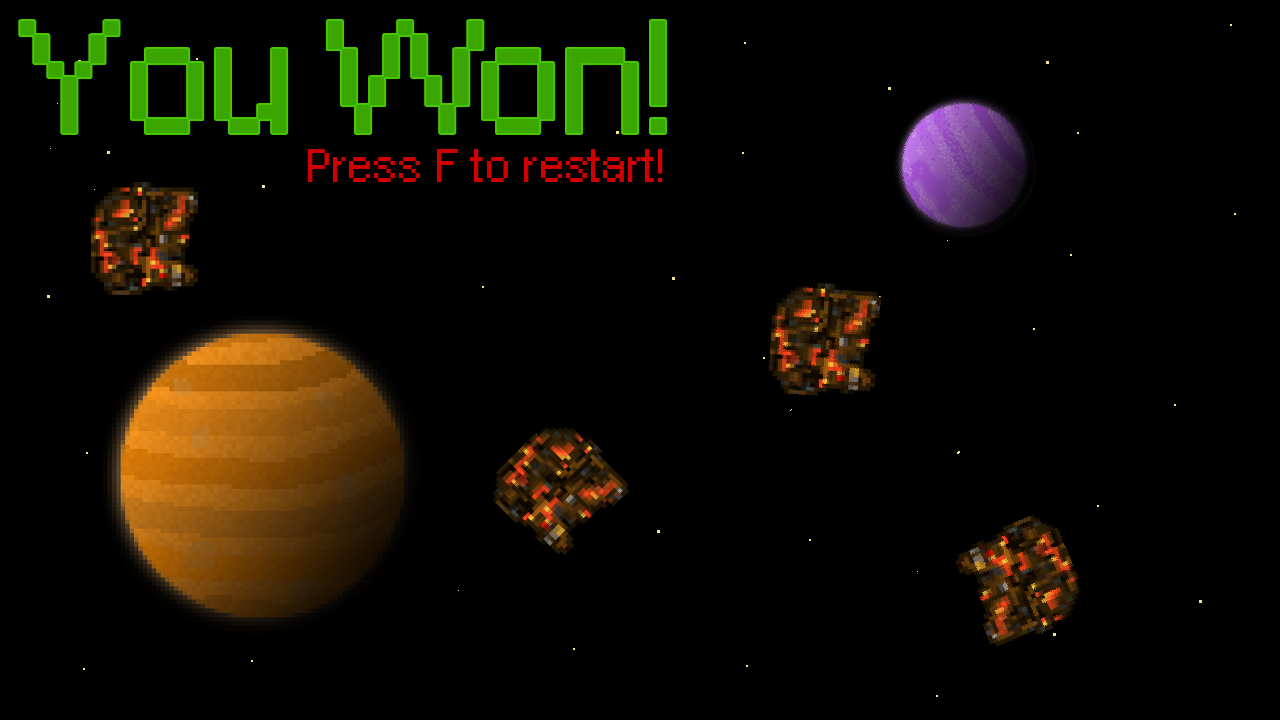
<style>
.page{position:relative;width:1280px;height:720px;background:#000000}
.page>*{position:absolute;margin:0}
.t1{font:112px "PixelArial11";color:#3ba600}
.t2{font:33.3px "PixelArial11";color:#ce0000}
</style>
<div class="page">
<p class="t1" style="left:20px;top:21px;width:646px;height:112px">You Won!</p>
<p class="t2" style="left:308px;top:149px;width:355px;height:33px">Press F to restart!</p>
</div>
